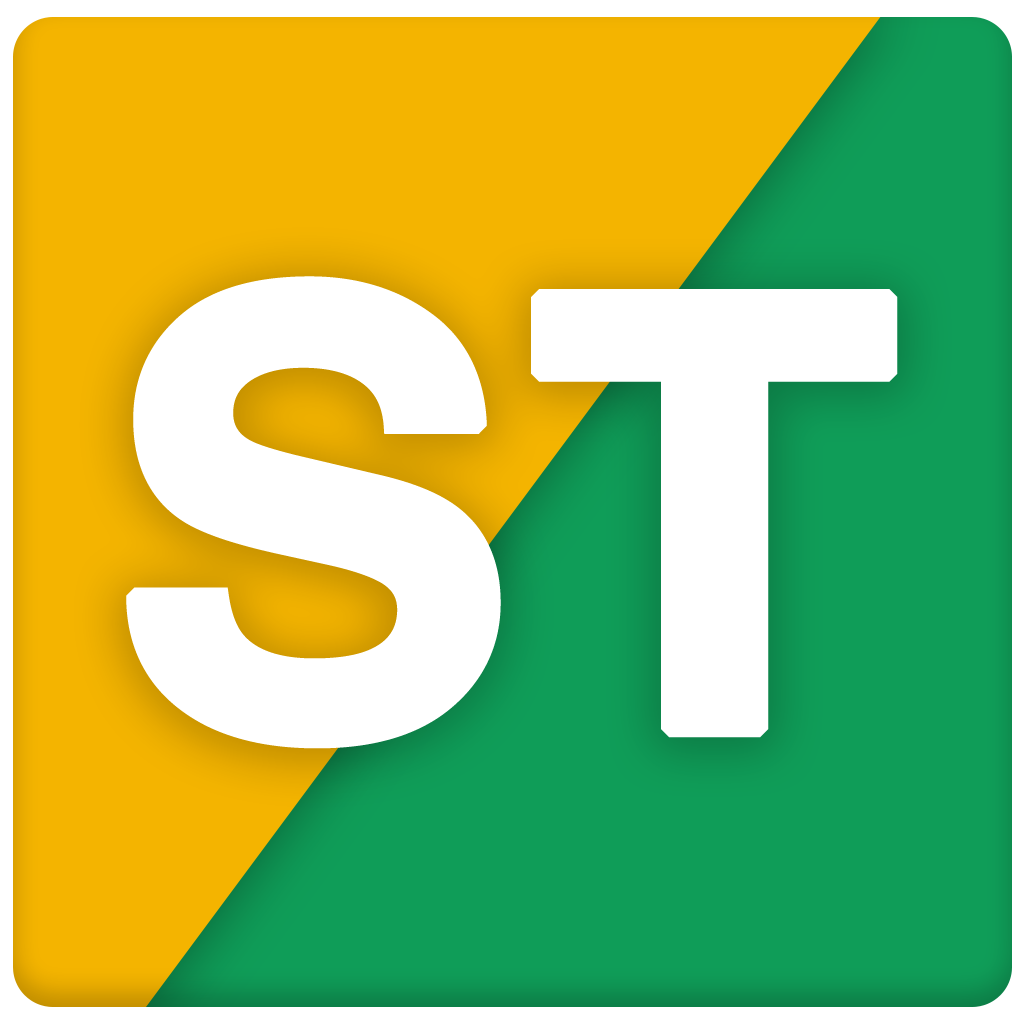
<style>
.page{position:relative;width:1024px;height:1024px;background:#ffffff}
.page>*{position:absolute;margin:0}
.t1{font:600px "Helvetica-Bold";color:#ffffff;font-weight:bold}
</style>
<div class="page">
<p class="t1" style="left:126px;top:276px;width:375px;height:473px">S</p>
<p class="t1" style="left:531px;top:289px;width:367px;height:449px">T</p>
</div>
